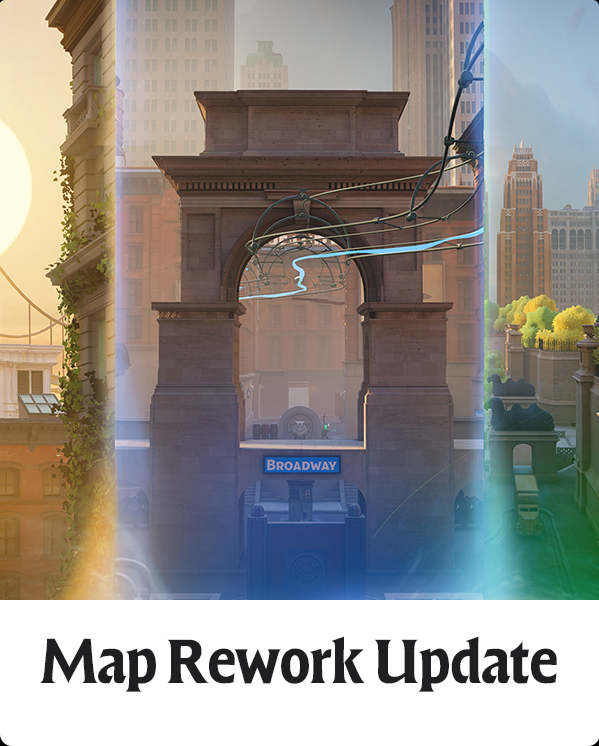
<style>
.page{position:relative;width:599px;height:746px}
.page>*{position:absolute;margin:0}
.t1{font:63.9px "ForevsDemo-Bold";color:#1f1f21}
</style>
<div class="page">
<p class="t1" style="left:40px;top:636px;width:517px;height:56px">Map Rework Update</p>
</div>
